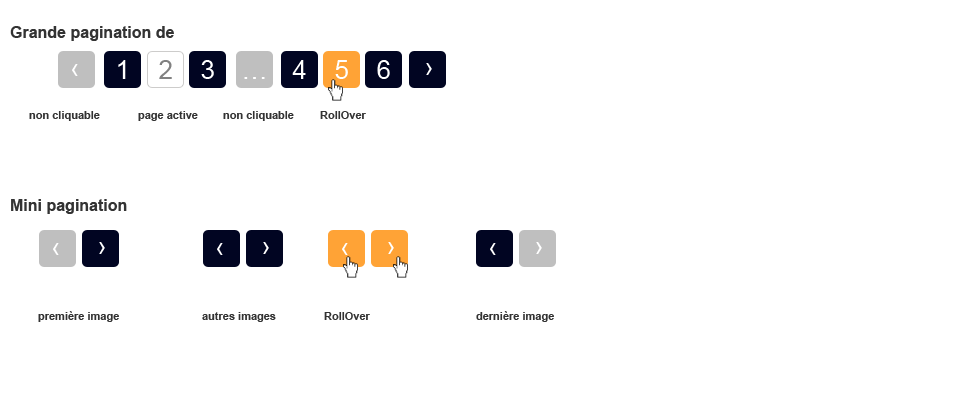
<style>
.page{position:relative;width:980px;height:401px;background:#ffffff}
.page>*{position:absolute;margin:0}
.t1{font:16px "Arial-BoldMT";color:#333333}
.t2{font:26px "ArialMT";color:#ffffff}
.t3{font:26px "ArialMT";color:#818181}
.t4{font:11px "Arial-BoldMT";color:#333333}
</style>
<div class="page">
<p class="t1" style="left:10px;top:26px;width:164px;height:15px">Grande pagination de page</p>
<p class="t2" style="left:72px;top:64px;width:6px;height:12px;rotate:180deg">›</p>
<p class="t2" style="left:118px;top:60px;width:8px;height:19px">1</p>
<p class="t3" style="left:159px;top:60px;width:13px;height:19px">2</p>
<p class="t2" style="left:201px;top:60px;width:13px;height:19px">3</p>
<p class="t2" style="left:292px;top:60px;width:14px;height:19px">4</p>
<p class="t2" style="left:335px;top:60px;width:13px;height:19px">5</p>
<p class="t2" style="left:377px;top:60px;width:13px;height:19px">6</p>
<p class="t2" style="left:426px;top:63px;width:6px;height:12px">›</p>
<p class="t2" style="left:244px;top:77px;width:21px;height:2px">…</p>
<p class="t4" style="left:29px;top:111px;width:71px;height:10px">non cliquable</p>
<p class="t4" style="left:138px;top:111px;width:60px;height:10px">page active</p>
<p class="t4" style="left:223px;top:111px;width:71px;height:10px">non cliquable</p>
<p class="t4" style="left:320px;top:111px;width:46px;height:8px">RollOver</p>
<p class="t1" style="left:11px;top:199px;width:116px;height:15px">Mini pagination</p>
<p class="t2" style="left:53px;top:243px;width:6px;height:12px;rotate:180deg">›</p>
<p class="t2" style="left:99px;top:242px;width:6px;height:12px">›</p>
<p class="t2" style="left:217px;top:243px;width:6px;height:12px;rotate:180deg">›</p>
<p class="t2" style="left:263px;top:242px;width:6px;height:12px">›</p>
<p class="t2" style="left:342px;top:243px;width:6px;height:12px;rotate:180deg">›</p>
<p class="t2" style="left:388px;top:242px;width:6px;height:12px">›</p>
<p class="t2" style="left:490px;top:243px;width:6px;height:12px;rotate:180deg">›</p>
<p class="t2" style="left:536px;top:242px;width:6px;height:12px">›</p>
<p class="t4" style="left:38px;top:311px;width:81px;height:11px">première image</p>
<p class="t4" style="left:202px;top:312px;width:74px;height:10px">autres images</p>
<p class="t4" style="left:324px;top:312px;width:46px;height:8px">RollOver</p>
<p class="t4" style="left:476px;top:311px;width:78px;height:11px">dernière image</p>
</div>
